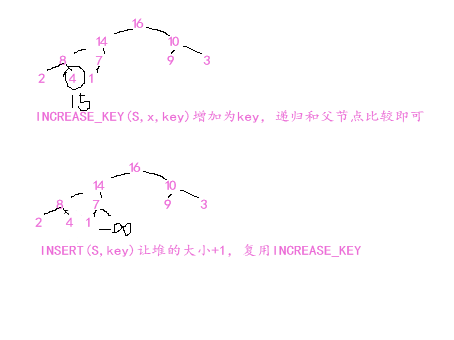
<style>
.page{position:relative;width:454px;height:340px;background:#ffffff}
.page>*{position:absolute;margin:0}
.t1{font:13.3px "¿¬Ìå";color:#ec6cd8;scale:1.12 1}
</style>
<div class="page">
<p class="t1" style="left:37px;top:110px;width:387px;height:13px">INCREASE_KEY(S,x,key)增加为key，递归和父节点比较即可</p>
<p class="t1" style="left:41px;top:244px;width:320px;height:13px">INSERT(S,key)让堆的大小+1，复用INCREASE_KEY</p>
</div>
